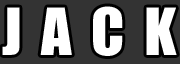
<style>
.page{position:relative;width:180px;height:64px;background:#333333}
.page>*{position:absolute;margin:0}
.t1{font:60px "Impact";letter-spacing:0.32em;color:#ffffff}
</style>
<div class="page">
<p class="t1" style="left:2px;top:6px;width:175px;height:50px">JACK</p>
</div>
